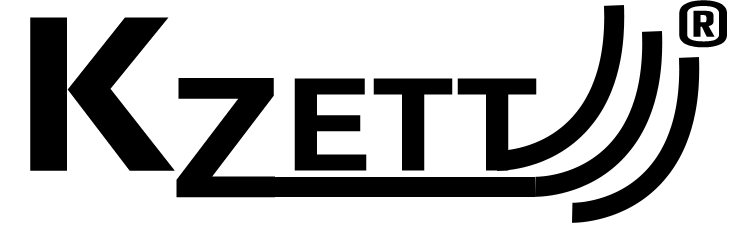
<style>
.page{position:relative;width:730px;height:234px;background:#ffffff}
.page>*{position:absolute;margin:0}
.t1{font:70px "Play-Bold";color:#000000;text-transform:uppercase}
.t2{font:235.7px "Play-Bold";color:#000000;text-transform:uppercase}
.t3{font:183.3px "Play-Bold";color:#000000;text-transform:uppercase}
.t4{font:141.4px "Play-Bold";color:#000000;text-transform:uppercase}
</style>
<div class="page">
<p class="t1" style="left:679px;top:0px;width:48px;height:48px">®</p>
<p class="t2" style="left:30px;top:17px;width:145px;height:154px">K</p>
<p class="t3" style="left:176px;top:78px;width:99px;height:120px">z</p>
<p class="t4" style="left:294px;top:78px;width:243px;height:93px">ett</p>
</div>
